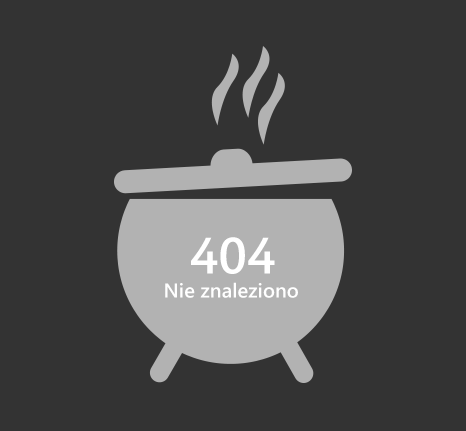
<style>
.page{position:relative;width:466px;height:431px;background:#333333}
.page>*{position:absolute;margin:0}
.t1{font:51px "SegoeWP-Semibold";letter-spacing:0.005em;color:#ffffff}
.t2{font:20px "SegoeWP-Semibold";letter-spacing:0.005em;color:#ffffff}
</style>
<div class="page">
<p class="t1" style="left:191px;top:237px;width:84px;height:37px">404</p>
<p class="t2" style="left:165px;top:282px;width:133px;height:16px">Nie znaleziono</p>
</div>
